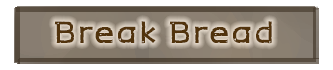
<style>
.page{position:relative;width:333px;height:70px;background:#ffffff}
.page>*{position:absolute;margin:0}
.t1{font:30px "H2mkpB";color:#51330d}
</style>
<div class="page">
<p class="t1" style="left:54px;top:21px;width:218px;height:23px">Break Bread</p>
</div>
